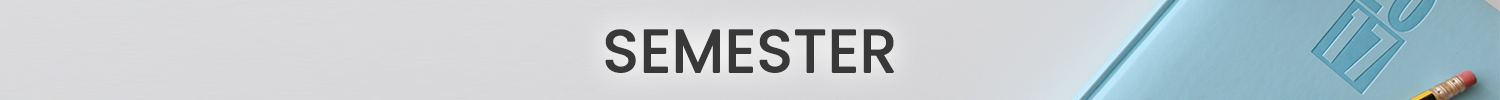
<style>
.page{position:relative;width:1500px;height:100px}
.page>*{position:absolute;margin:0}
.t1{font:60px "SVN-Poppins";color:#383838;font-weight:bold}
</style>
<div class="page">
<p class="t1" style="left:605px;top:29px;width:289px;height:44px">SEMESTER</p>
</div>
